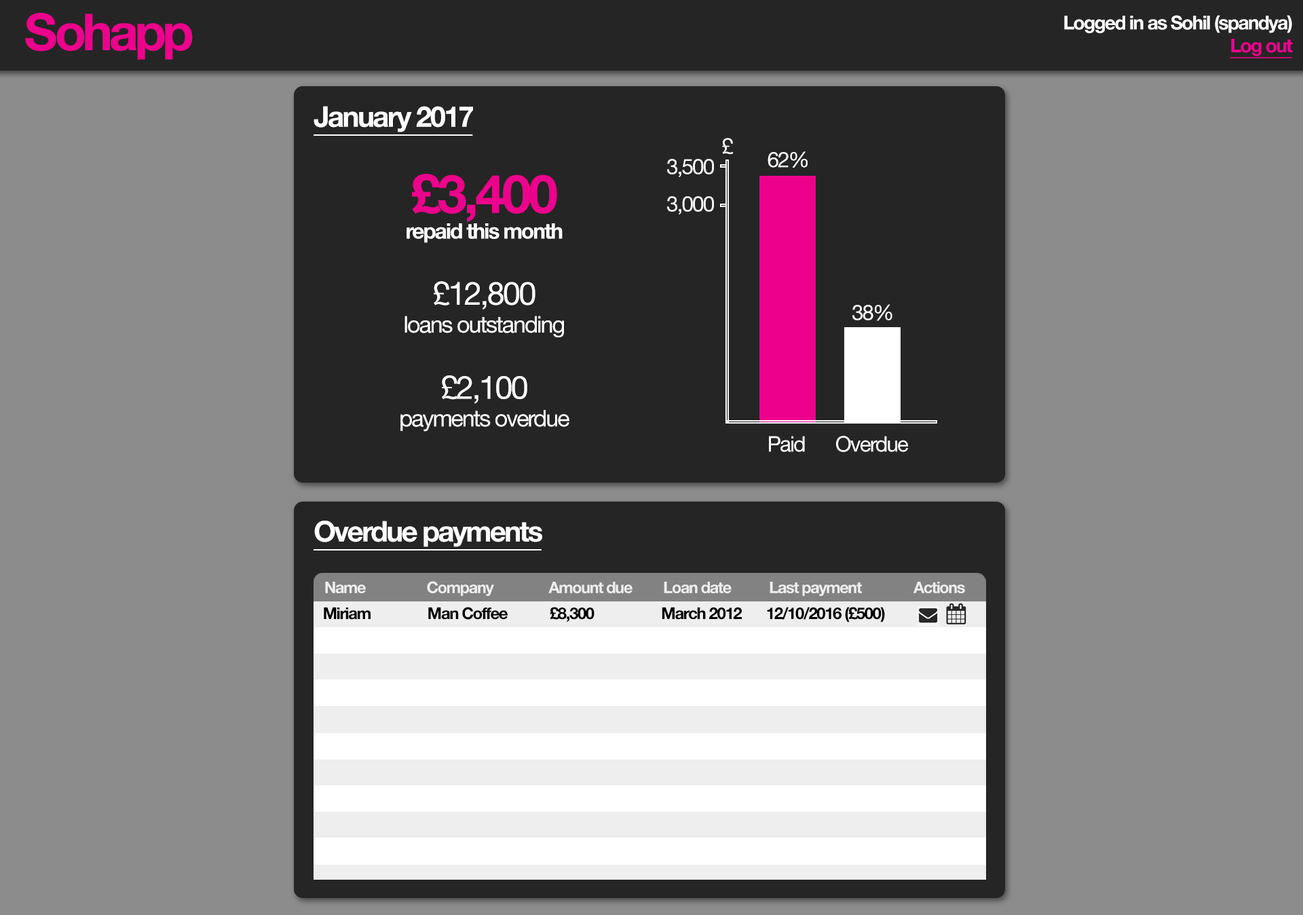
<style>
.page{position:relative;width:1303px;height:915px;background:#8c8c8c}
.page>*{position:absolute;margin:0}
.t1{font:50.9px "HelveticaNeue-Bold";letter-spacing:-0.06em;color:#ec008c}
.t2{font:50.9px "HelveticaNeue-Bold";letter-spacing:-0.035em;color:#ec008c}
.t3{font:19px "HelveticaNeue-Bold";letter-spacing:-0.06em;color:#ffffff}
.t4{font:19px "HelveticaNeue-Bold";letter-spacing:-0.06em;color:#ec008c;text-decoration:underline}
.t5{font:28.5px "HelveticaNeue-Bold";letter-spacing:-0.06em;color:#ffffff;text-decoration:underline}
.t6{font:23.1px "HelveticaNeue";letter-spacing:-0.06em;color:#ffffff}
.t7{font:21.3px "HelveticaNeue";letter-spacing:-0.06em;color:#ffffff}
.t8{font:21.3px "HelveticaNeue-Bold";letter-spacing:-0.06em;color:#ffffff}
.t9{font:53.4px "HelveticaNeue-Bold";letter-spacing:-0.06em;color:#ec008c}
.t10{font:32px "HelveticaNeue";letter-spacing:-0.06em;color:#ffffff}
.t11{font:16px "HelveticaNeue-Bold";letter-spacing:-0.06em;color:#eeeeee}
.t12{font:16.3px "HelveticaNeue-Bold";letter-spacing:-0.06em;color:#000000}
</style>
<div class="page">
<p class="t1" style="left:25px;top:13px;width:168px;height:47px"><span class="t2">S</span>ohapp</p>
<p class="t3" style="left:1064px;top:15px;width:229px;height:43px;text-align:right">Logged in as Sohil (spandya)<br><span class="t4">Log out</span></p>
<p class="t5" style="left:314px;top:106px;width:159px;height:30px">January 2017<span class="t6"></span></p>
<p class="t7" style="left:722px;top:138px;width:12px;height:16px">£</p>
<p class="t7" style="left:667px;top:159px;width:47px;height:18px">3,500</p>
<p class="t7" style="left:768px;top:151px;width:40px;height:17px">62%</p>
<p class="t8" style="left:400px;top:174px;width:169px;height:258px;text-align:center"><span class="t9">£3,400<br></span>repaid this month<br><br><span class="t10">£12,800<br></span><span class="t6">loans outstanding<br><br></span><span class="t10">£2,100<br></span><span class="t6">payments overdue</span></p>
<p class="t7" style="left:667px;top:196px;width:47px;height:18px">3,000</p>
<p class="t7" style="left:853px;top:304px;width:40px;height:17px">38%</p>
<p class="t7" style="left:769px;top:436px;width:36px;height:16px">Paid</p>
<p class="t7" style="left:836px;top:436px;width:72px;height:16px">Overdue</p>
<p class="t5" style="left:314px;top:521px;width:228px;height:29px">Overdue payments<br><span class="t6"></span></p>
<p class="t11" style="left:325px;top:581px;width:640px;height:15px">Name            Company                Amount due         Loan date           Last payment               Actions</p>
<p class="t12" style="left:324px;top:607px;width:561px;height:15px">Miriam                Man Coffee            £8,300                   March 2012       12/10/2016 (£500)</p>
</div>
